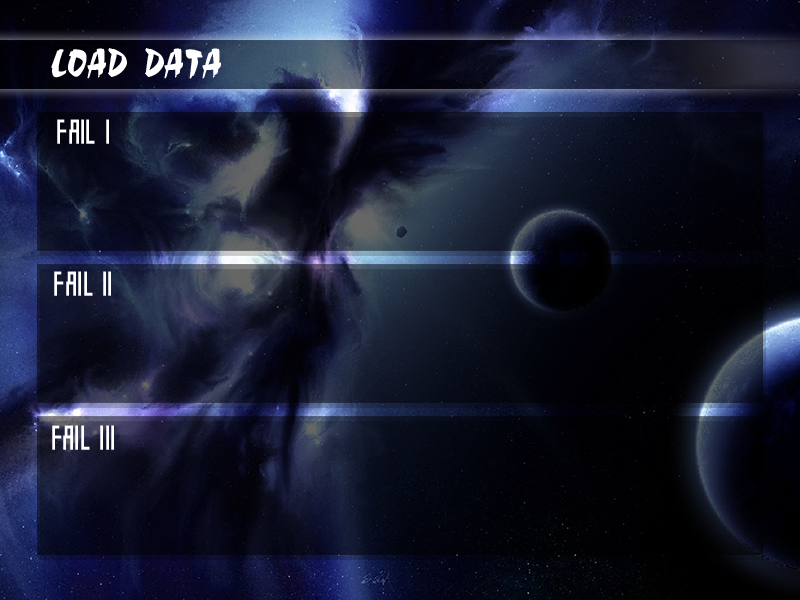
<style>
.page{position:relative;width:800px;height:600px}
.page>*{position:absolute;margin:0}
.t1{font:38.5px "CR¸Ó¸®Ã¼_°¡·Î";color:#ffffff;scale:0.91 1}
.t2{font:38.5px "A008¾È»ó¼öÃ¼-";color:#ffffff;scale:0.91 1}
</style>
<div class="page">
<p class="t1" style="left:51px;top:48px;width:170px;height:31px">LOAD DATA</p>
<p class="t2" style="left:57px;top:119px;width:52px;height:25px">FAIL I</p>
<p class="t2" style="left:54px;top:271px;width:57px;height:25px">FAIL II</p>
<p class="t2" style="left:52px;top:425px;width:62px;height:25px">FAIL III</p>
</div>
